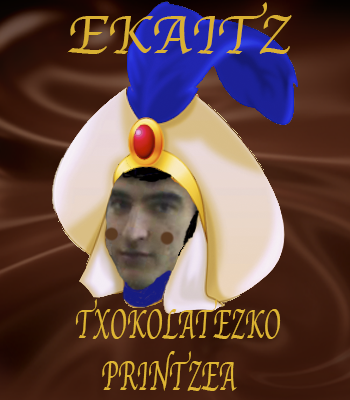
<style>
.page{position:relative;width:350px;height:400px}
.page>*{position:absolute;margin:0}
.t1{font:56.7px "Apple-Chancery";color:#d9b032;scale:0.97 1}
.t2{font:42.9px "Apple-Chancery";color:#deb533;scale:0.56 1}
</style>
<div class="page">
<p class="t1" style="left:67px;top:2px;width:225px;height:52px">EKAITZ</p>
<p class="t2" style="left:75px;top:299px;width:206px;height:92px">TXOKOLATEZKO<br>    PRINTZEA</p>
</div>
